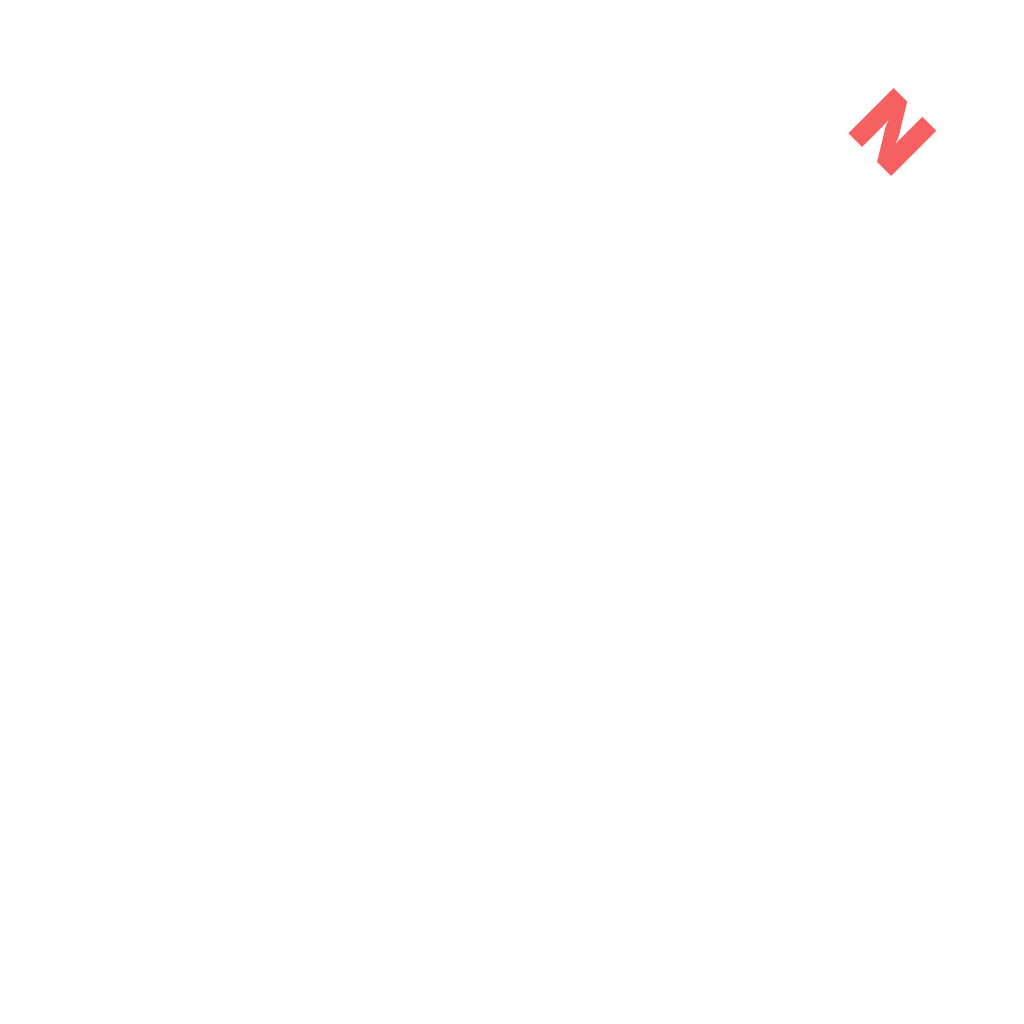
<style>
.page{position:relative;width:1024px;height:1024px;background:#ffffff}
.page>*{position:absolute;margin:0}
.t1{font:89.1px "Swiss721BT-Black";color:#f66060}
</style>
<div class="page">
<p class="t1" style="left:848px;top:88px;width:89px;height:88px;rotate:45deg">N</p>
</div>
